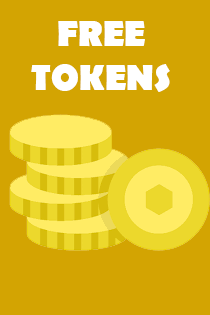
<style>
.page{position:relative;width:210px;height:315px;background:#d3a402}
.page>*{position:absolute;margin:0}
.t1{font:36px "BerlinSansFB-Bold";color:#ffffff}
</style>
<div class="page">
<p class="t1" style="left:31px;top:21px;width:139px;height:71px;text-align:center">FREE TOKENS</p>
</div>
